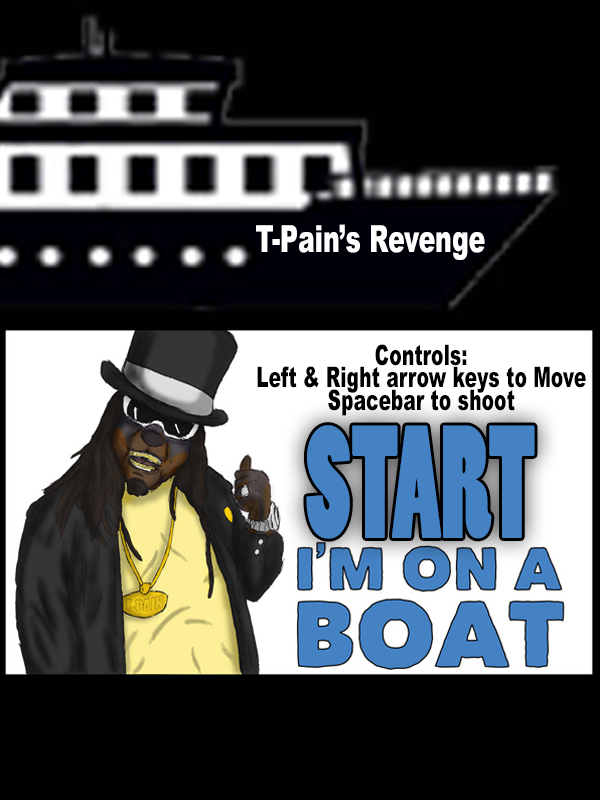
<style>
.page{position:relative;width:600px;height:800px;background:#010101}
.page>*{position:absolute;margin:0}
.t1{font:37.5px "Arial-Black";color:#ffffff;scale:0.67 1}
.t2{font:28.1px "Arial-Black";color:#000000;scale:0.67 1}
.t3{font:150px "PoplarStd";color:#4582c3;scale:0.67 1}
</style>
<div class="page">
<p class="t1" style="left:256px;top:224px;width:229px;height:36px">T-Pain’s Revenge</p>
<p class="t2" style="left:257px;top:344px;width:329px;height:72px;text-align:center">Controls:<br>Left &amp; Right arrow keys to Move<br>Spacebar to shoot</p>
<p class="t3" style="left:306px;top:425px;width:229px;height:114px">START</p>
</div>
